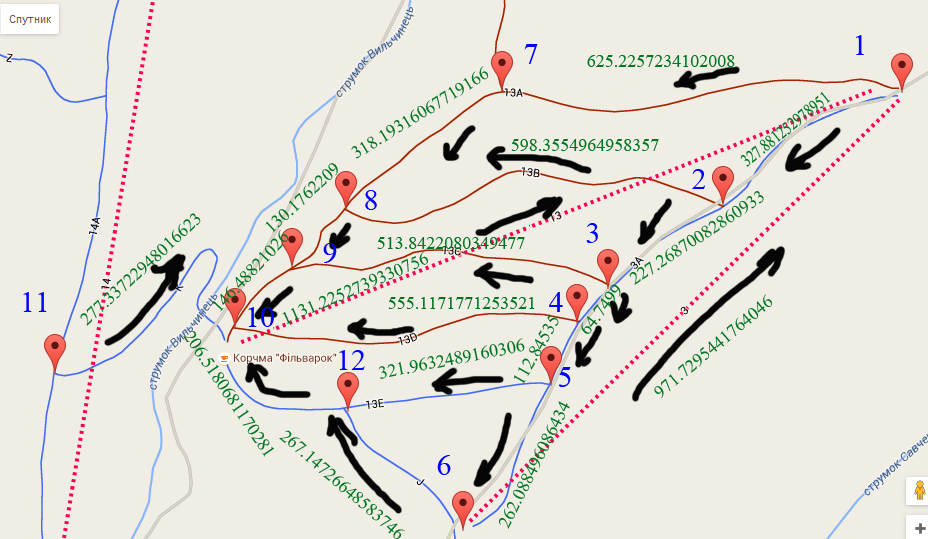
<style>
.page{position:relative;width:928px;height:539px;background:#f0ede5}
.page>*{position:absolute;margin:0}
.t1{font:30px "TimesNewRomanPSMT";color:#0000ff}
.t2{font:18px "TimesNewRomanPSMT";color:#007520}
.t3{font:18px "TimesNewRomanPSMT";color:#007520;scale:0.78 1}
</style>
<div class="page">
<p class="t1" style="left:856px;top:35px;width:8px;height:20px">1</p>
<p class="t1" style="left:524px;top:44px;width:14px;height:20px">7</p>
<p class="t2" style="left:587px;top:55px;width:148px;height:12px">625.2257234102008</p>
<p class="t2" style="left:351px;top:66px;width:138px;height:93px;rotate:-32deg">318.19316067719166</p>
<p class="t3" style="left:740px;top:92px;width:91px;height:75px;rotate:-39deg">327.881252978951</p>
<p class="t2" style="left:511px;top:139px;width:148px;height:12px">598.3554964958357</p>
<p class="t2" style="left:265px;top:163px;width:73px;height:70px;rotate:-42deg">130.1762209</p>
<p class="t1" style="left:692px;top:169px;width:14px;height:20px">2</p>
<p class="t1" style="left:365px;top:190px;width:12px;height:20px">8</p>
<p class="t2" style="left:629px;top:191px;width:135px;height:94px;rotate:-33deg">227.26870082860933</p>
<p class="t2" style="left:80px;top:213px;width:121px;height:113px;rotate:-42deg">277.33722948016623</p>
<p class="t2" style="left:212px;top:230px;width:77px;height:82px;rotate:-47deg">146.48821026</p>
<p class="t1" style="left:586px;top:223px;width:12px;height:20px">3</p>
<p class="t1" style="left:323px;top:243px;width:14px;height:20px">9</p>
<p class="t2" style="left:377px;top:237px;width:148px;height:12px">513.8422080349477</p>
<p class="t2" style="left:282px;top:251px;width:146px;height:73px;rotate:-23deg">1131.2252739330756</p>
<p class="t1" style="left:23px;top:292px;width:24px;height:20px">11</p>
<p class="t1" style="left:549px;top:292px;width:14px;height:20px">4</p>
<p class="t2" style="left:581px;top:284px;width:40px;height:50px;rotate:-52deg">64.7499</p>
<p class="t2" style="left:654px;top:294px;width:119px;height:105px;rotate:-40deg">971.7295441764046</p>
<p class="t2" style="left:388px;top:297px;width:147px;height:12px">555.1171771253521</p>
<p class="t1" style="left:248px;top:307px;width:26px;height:20px">10</p>
<p class="t2" style="left:514px;top:314px;width:45px;height:70px;rotate:-60deg">112.84535</p>
<p class="t2" style="left:183px;top:331px;width:91px;height:126px;rotate:56deg">206.5180681170281</p>
<p class="t2" style="left:378px;top:338px;width:147px;height:41px;rotate:-11deg">321.9632489160306</p>
<p class="t1" style="left:339px;top:350px;width:26px;height:20px">12</p>
<p class="t1" style="left:559px;top:367px;width:12px;height:20px">5</p>
<p class="t2" style="left:498px;top:401px;width:72px;height:128px;rotate:-63deg">262.088496086434</p>
<p class="t2" style="left:279px;top:430px;width:127px;height:110px;rotate:41deg">267.14726648583746</p>
<p class="t1" style="left:437px;top:455px;width:14px;height:20px">6</p>
</div>
